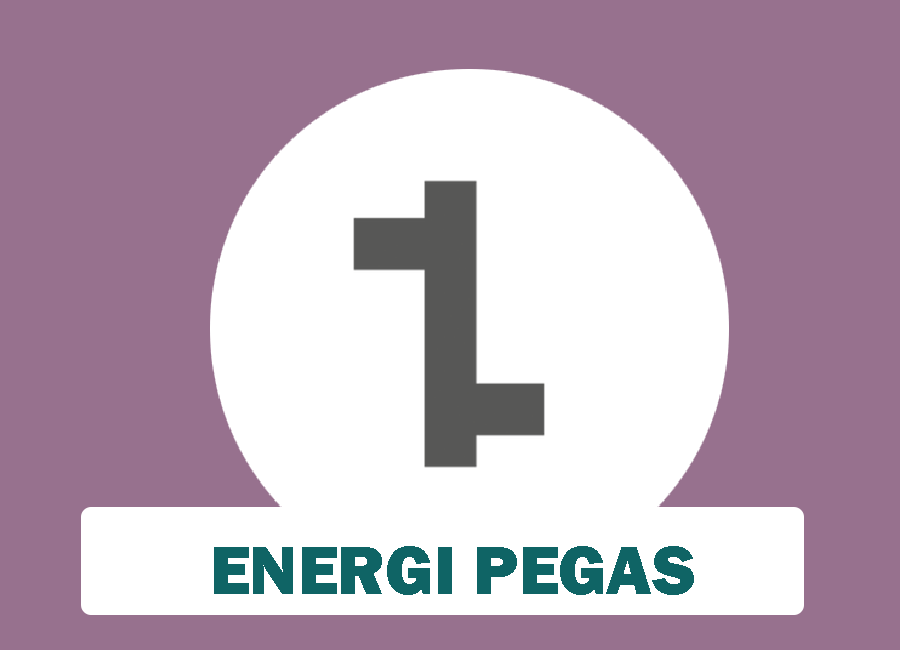
<style>
.page{position:relative;width:900px;height:650px;background:#97718e}
.page>*{position:absolute;margin:0}
.t1{font:70px "FranklinGothic-Heavy";color:#0f6465}
</style>
<div class="page">
<p class="t1" style="left:214px;top:546px;width:480px;height:49px">ENERGI PEGAS</p>
</div>
